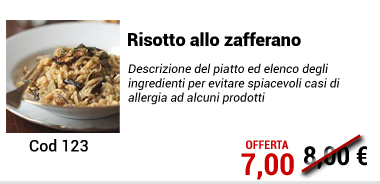
<style>
.page{position:relative;width:380px;height:184px;background:#ffffff}
.page>*{position:absolute;margin:0}
.t1{font:18px "Roboto-Black";color:#000000}
.t2{font:12px "Roboto-Italic";color:#000000}
.t3{font:16px "Roboto-Medium";color:#000000}
.t4{font:12px "Roboto-BoldCondensed";color:#cc0000}
.t5{font:26px "Roboto-BoldCondensed";color:#000000}
.t6{font:30px "Roboto-BoldCondensed";color:#cc0000}
</style>
<div class="page">
<p class="t1" style="left:128px;top:32px;width:173px;height:15px">Risotto allo zafferano</p>
<p class="t2" style="left:128px;top:63px;width:212px;height:42px">Descrizione del piatto ed elenco degli <br>ingredienti per evitare spiacevoli casi di<br>allergia ad alcuni prodotti</p>
<p class="t3" style="left:29px;top:139px;width:59px;height:13px">Cod 123</p>
<p class="t4" style="left:246px;top:140px;width:43px;height:9px">OFFERTA</p>
<p class="t5" style="left:304px;top:146px;width:63px;height:23px">8,00 €</p>
<p class="t6" style="left:241px;top:153px;width:53px;height:27px">7,00</p>
</div>
